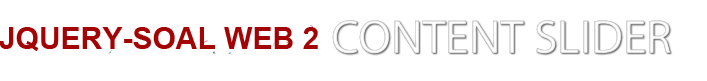
<style>
.page{position:relative;width:707px;height:81px;background:#ffffff}
.page>*{position:absolute;margin:0}
.t1{font:30px "Arial-BoldMT";color:#a30303}
</style>
<div class="page">
<p class="t1" style="left:0px;top:27px;width:318px;height:24px">JQUERY-SOAL WEB 2</p>
</div>
